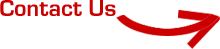
<style>
.page{position:relative;width:220px;height:49px;background:#ffffff}
.page>*{position:absolute;margin:0}
.t1{font:24px "Eurose";color:#cc0000}
</style>
<div class="page">
<p class="t1" style="left:0px;top:0px;width:116px;height:16px">Contact Us</p>
</div>
